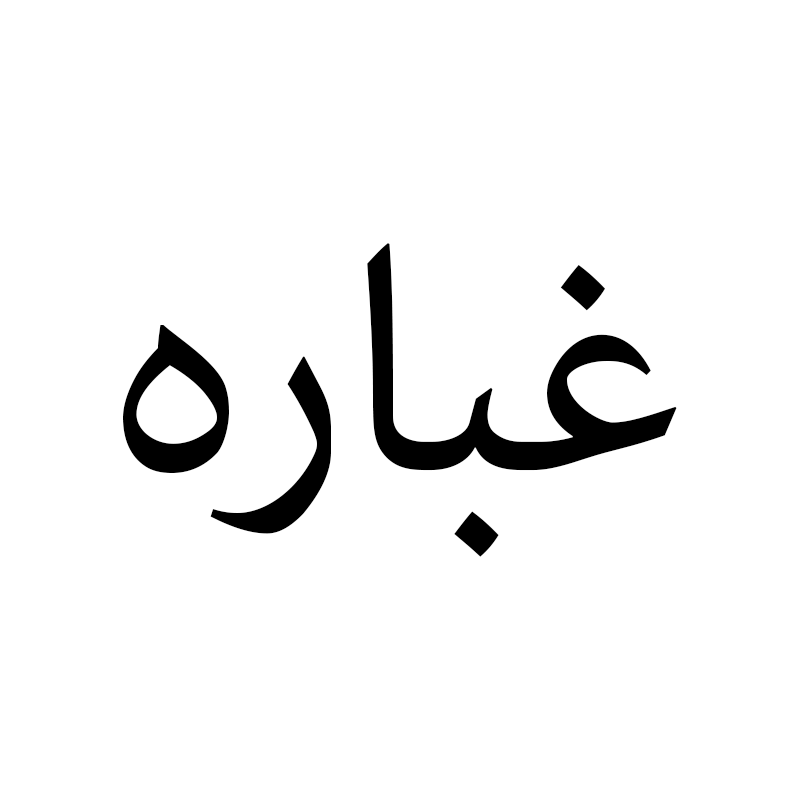
<style>
.page{position:relative;width:800px;height:800px;background:#ffffff}
.page>*{position:absolute;margin:0}
.t1{font:450px "AdobeArabic-Regular";color:#000000}
</style>
<div class="page">
<p class="t1" style="left:123px;top:243px;width:554px;height:314px">غبارہ</p>
</div>
